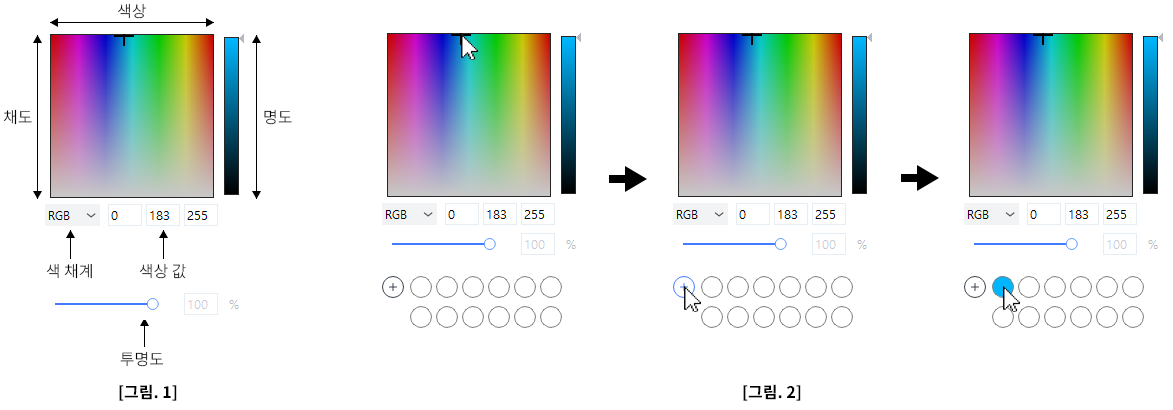
<style>
.page{position:relative;width:1173px;height:410px;background:#ffffff}
.page>*{position:absolute;margin:0}
.t1{font:16px "Autoincs_TC_2020_Regular";color:#000000}
.t2{font:12px "Autoincs_TC_2020_Regular";color:#000000}
.t3{font:16px "Autoincs_TC_2020_Bold";color:#000000}
</style>
<div class="page">
<p class="t1" style="left:118px;top:3px;width:28px;height:16px">색상</p>
<p class="t1" style="left:3px;top:109px;width:29px;height:16px">채도</p>
<p class="t1" style="left:264px;top:109px;width:28px;height:16px">명도</p>
<p class="t2" style="left:46px;top:263px;width:46px;height:16px">색 채계</p>
<p class="t2" style="left:139px;top:263px;width:47px;height:16px">색상 값</p>
<p class="t2" style="left:120px;top:351px;width:44px;height:16px">투명도</p>
<p class="t3" style="left:119px;top:384px;width:58px;height:17px">[그림. 1]</p>
<p class="t3" style="left:743px;top:384px;width:58px;height:17px">[그림. 2]</p>
</div>
